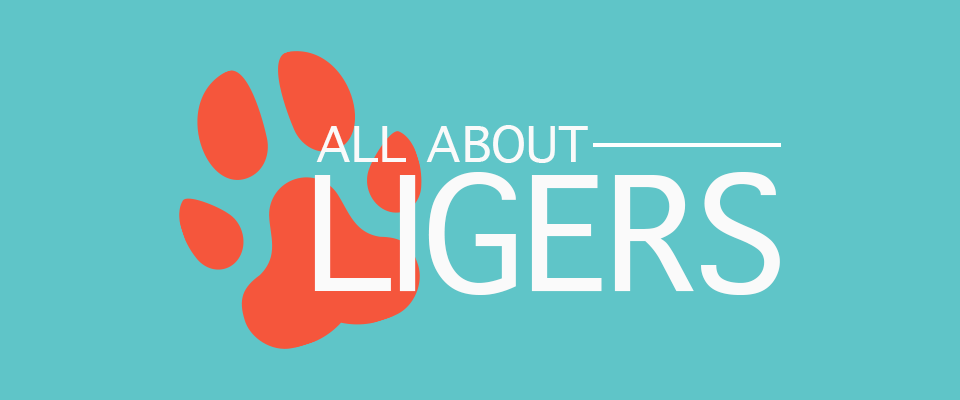
<style>
.page{position:relative;width:960px;height:400px;background:#5fc5c8}
.page>*{position:absolute;margin:0}
.t1{font:67px "AppleSymbols";letter-spacing:-0.02em;color:#fafafa;text-transform:uppercase}
.t2{font:215px "AppleSymbols";letter-spacing:-0.02em;color:#fafafa;text-transform:uppercase}
</style>
<div class="page">
<p class="t1" style="left:316px;top:125px;width:272px;height:38px">All About</p>
<p class="t2" style="left:314px;top:172px;width:466px;height:123px">Ligers</p>
</div>
